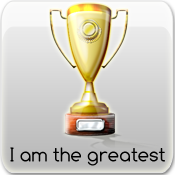
<style>
.page{position:relative;width:175px;height:175px}
.page>*{position:absolute;margin:0}
.t1{font:20px "Comfortaa";color:#000000}
</style>
<div class="page">
<p class="t1" style="left:10px;top:147px;width:155px;height:19px">I am the greatest</p>
</div>
